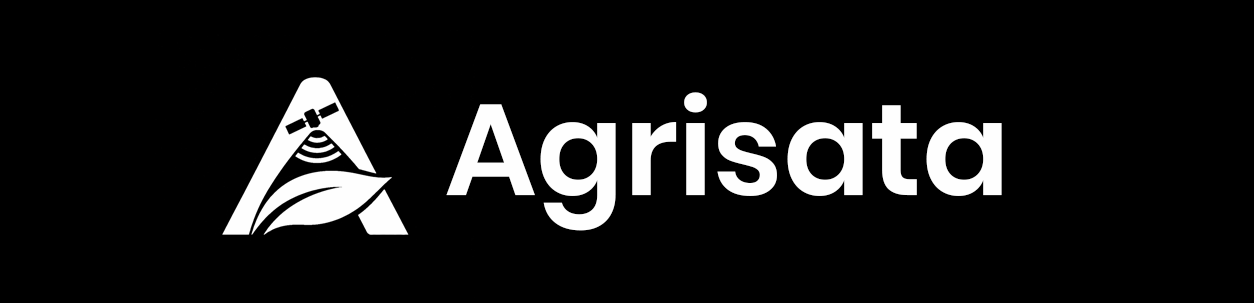
<style>
.page{position:relative;width:1254px;height:303px;background:#000000}
.page>*{position:absolute;margin:0}
.t1{font:129.8px "Poppins-SemiBold";color:#fefefe}
</style>
<div class="page">
<p class="t1" style="left:446px;top:92px;width:556px;height:139px">Agrisata</p>
</div>
